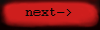
<style>
.page{position:relative;width:100px;height:30px;background:#ce1e1d}
.page>*{position:absolute;margin:0}
.t1{font:14px "Courier";color:#060606}
</style>
<div class="page">
<p class="t1" style="left:25px;top:8px;width:47px;height:8px">next-&gt;</p>
</div>
